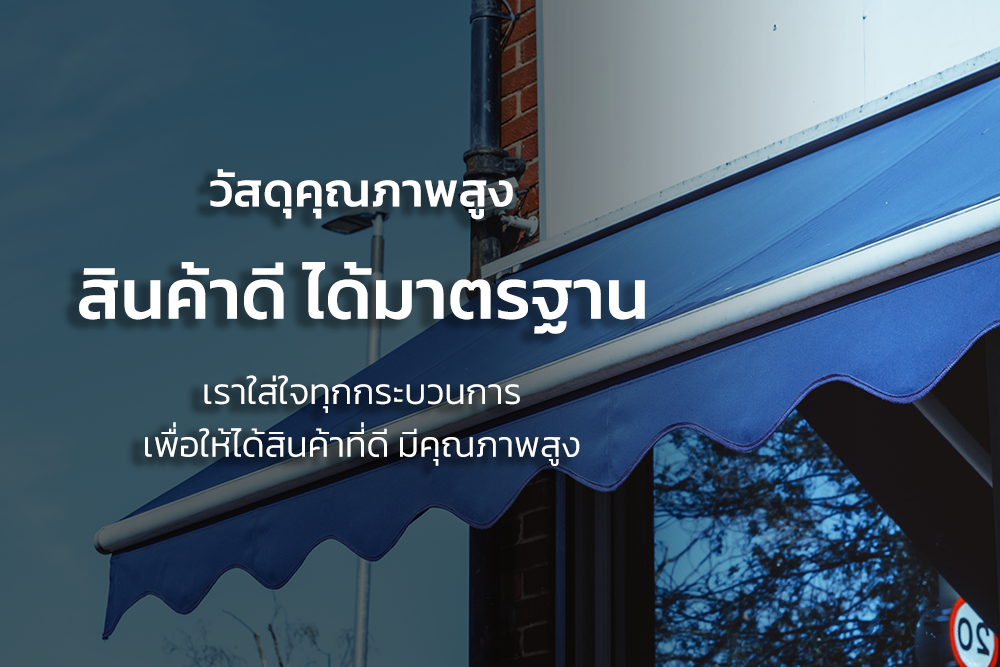
<style>
.page{position:relative;width:1000px;height:667px}
.page>*{position:absolute;margin:0}
.t1{font:48px "Kanit-Medium";color:#ffffff}
.t2{font:71.4px "Kanit-Medium";color:#ffffff}
.t3{font:36px "Kanit-Light";color:#ffffff}
</style>
<div class="page">
<p class="t1" style="left:210px;top:169px;width:303px;height:51px">วัสดุคุณภาพสูง</p>
<p class="t2" style="left:79px;top:262px;width:566px;height:72px">สินค้าดี ได้มาตรฐาน</p>
<p class="t3" style="left:145px;top:375px;width:435px;height:91px;text-align:center">เราใส่ใจทุกกระบวนการ<br> <br>เพื่อให้ได้สินค้าที่ดี มีคุณภาพสูง</p>
</div>
